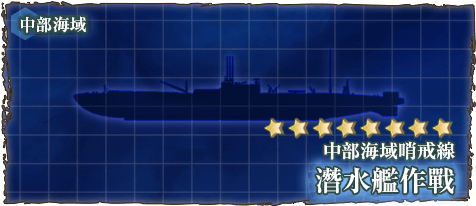
<style>
.page{position:relative;width:476px;height:206px}
.page>*{position:absolute;margin:0}
.t1{font:17px "RyuminPr6N-ExBold";color:#ffffff}
.t2{font:19px "RyuminPro-ExBold";color:#ffffff}
.t3{font:28px "RyuminPro-ExBold";color:#ffffff}
</style>
<div class="page">
<p class="t1" style="left:20px;top:16px;width:66px;height:17px">中部海域</p>
<p class="t2" style="left:324px;top:141px;width:131px;height:19px">中部海域哨戒線</p>
<p class="t3" style="left:316px;top:167px;width:139px;height:27px">潛水艦作戰</p>
</div>
